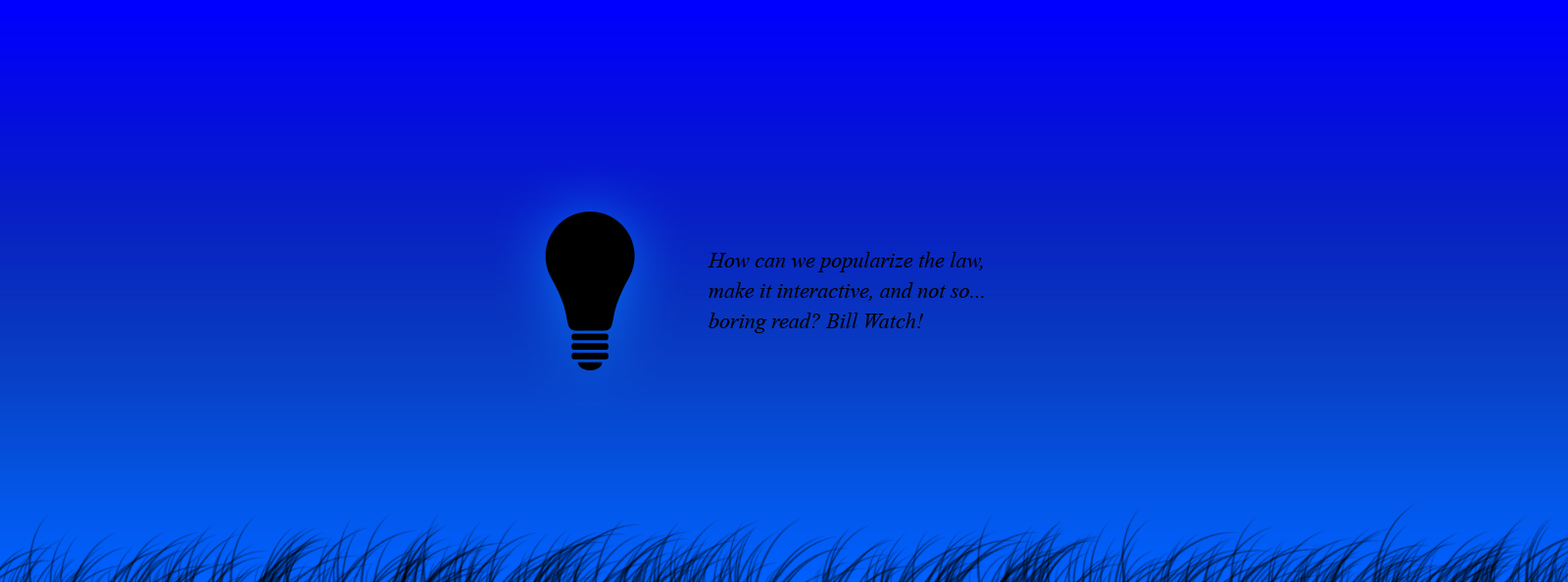
<style>
.page{position:relative;width:1568px;height:582px}
.page>*{position:absolute;margin:0}
.t1{font:21.6px/30.4px "TimesNewRomanPS-ItalicMT";color:#000000}
</style>
<div class="page">
<p class="t1" style="left:708px;top:252px;width:276px;height:81px">How can we popularize the law, make it interactive, and not so... boring read? Bill Watch!</p>
</div>
